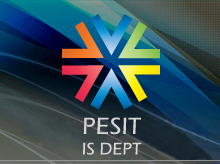
<style>
.page{position:relative;width:220px;height:164px}
.page>*{position:absolute;margin:0}
.t1{font:17.1px "ErasITC-Medium";letter-spacing:0.02em;color:#dad6d6}
.t2{font:24px "ErasITC-Medium";letter-spacing:0.02em;color:#dad6d6}
</style>
<div class="page">
<p class="t1" style="left:83px;top:117px;width:59px;height:38px;text-align:center"><span class="t2">PESIT</span> <br>IS DEPT</p>
</div>
